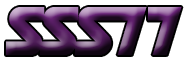
<style>
.page{position:relative;width:188px;height:64px;background:#ffffff}
.page>*{position:absolute;margin:0}
.t1{font:68px "DeathStar"}
</style>
<div class="page">
<p class="t1" style="left:6px;top:7px;width:176px;height:48px">SSS77</p>
</div>
